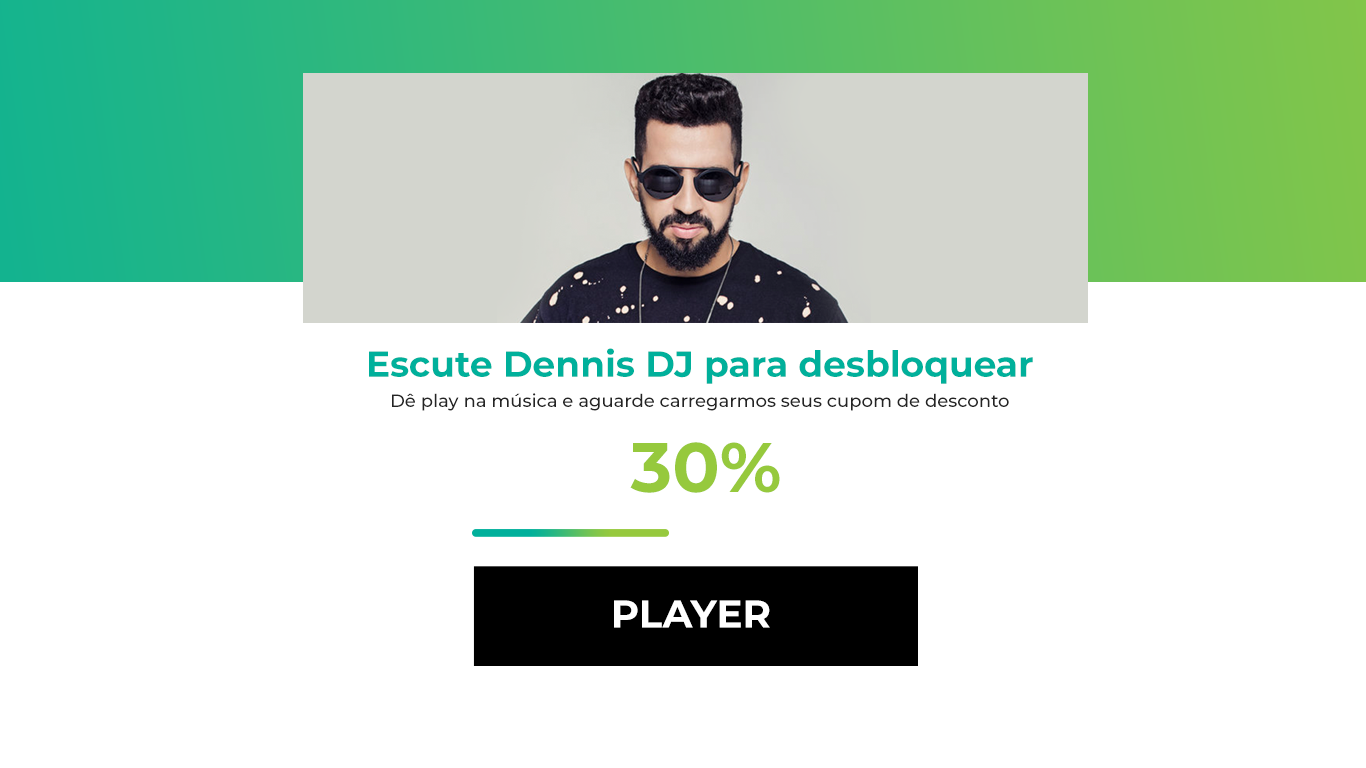
<style>
.page{position:relative;width:1366px;height:768px;background:#ffffff}
.page>*{position:absolute;margin:0}
.t1{font:36px "Montserrat-Bold";color:#00b09b}
.t2{font:18px "Montserrat-Medium";color:#242424}
.t3{font:70px "Montserrat-Bold";color:#96c93d}
.t4{font:38.7px "Montserrat-Bold";color:#ffffff}
</style>
<div class="page">
<p class="t1" style="left:369px;top:348px;width:664px;height:36px">Escute Dennis DJ para desbloquear</p>
<p class="t2" style="left:392px;top:393px;width:617px;height:18px">Dê play na música e aguarde carregarmos seus cupom de desconto</p>
<p class="t3" style="left:630px;top:442px;width:150px;height:51px">30%</p>
<p class="t4" style="left:614px;top:600px;width:156px;height:28px">PLAYER</p>
</div>
